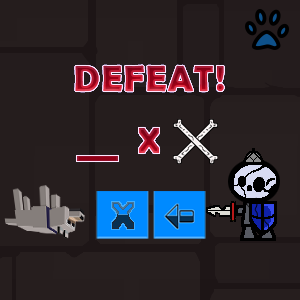
<style>
.page{position:relative;width:300px;height:300px;background:#251d1d}
.page>*{position:absolute;margin:0}
.t1{font:36px "BerlinSansFBDemi-Bold";letter-spacing:0.05em;text-transform:uppercase}
</style>
<div class="page">
<p class="t1" style="left:75px;top:65px;width:149px;height:27px">Defeat!</p>
<p class="t1" style="left:75px;top:65px;width:149px;height:27px">Defeat!</p>
<p class="t1" style="left:75px;top:65px;width:149px;height:27px">Defeat!</p>
<p class="t1" style="left:139px;top:128px;width:20px;height:25px">X</p>
<p class="t1" style="left:139px;top:128px;width:20px;height:25px">X</p>
<p class="t1" style="left:139px;top:128px;width:20px;height:25px">X</p>
</div>
